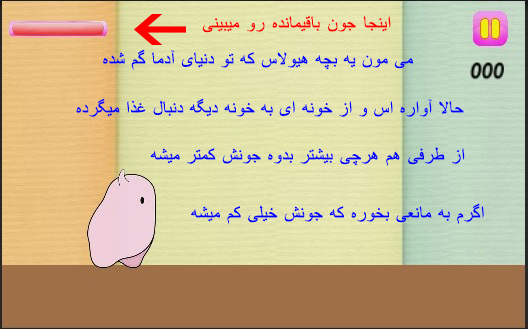
<style>
.page{position:relative;width:528px;height:329px}
.page>*{position:absolute;margin:0}
.t1{font:18.7px "ArialMT";letter-spacing:0.025em;color:#ff0000}
.t2{font:18.7px "ArialMT";letter-spacing:0.025em;color:#0000ff}
</style>
<div class="page">
<p class="t1" style="left:202px;top:16px;width:189px;height:17px">اینجا جون باقیمانده رو میبینی</p>
<p class="t2" style="left:103px;top:49px;width:310px;height:21px">می مون یه بچه هیولاس که تو دنیای آدما گم شده</p>
<p class="t2" style="left:76px;top:98px;width:388px;height:19px">حالا آواره اس و از خونه ای به خونه دیگه دنبال غذا میگرده</p>
<p class="t2" style="left:150px;top:147px;width:315px;height:19px">از طرفی هم هرچی بیشتر بدوه جونش کمتر میشه</p>
<p class="t2" style="left:191px;top:203px;width:293px;height:21px">اگرم به مانعی بخوره که جونش خیلی کم میشه</p>
</div>
